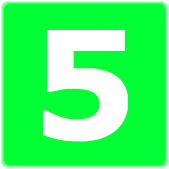
<style>
.page{position:relative;width:169px;height:169px;background:#00ff33}
.page>*{position:absolute;margin:0}
.t1{font:150px "Verdana-Bold";color:#ffffff;text-transform:uppercase}
</style>
<div class="page">
<p class="t1" style="left:43px;top:30px;width:85px;height:112px">5</p>
</div>
